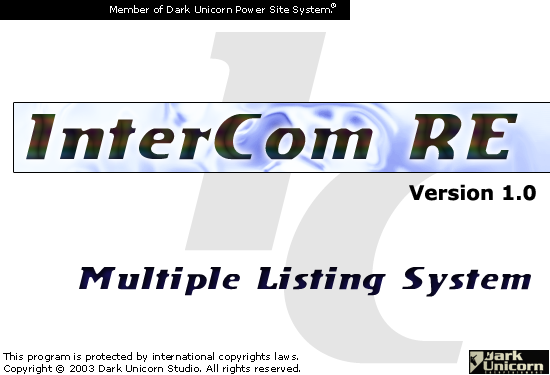
<style>
.page{position:relative;width:550px;height:375px;background:#ffffff}
.page>*{position:absolute;margin:0}
.t1{font:10px "Verdana";color:#ffffff}
.t2{font:5px "Verdana";color:#ffffff}
.t3{font:78px "DSMotionDemo-Italic"}
.t4{font:20px "Verdana-Bold";color:#000000}
.t5{font:38px "DSMotionDemo-Italic";color:#0a0826}
.t6{font:10px "Verdana";color:#000000}
</style>
<div class="page">
<p class="t1" style="left:110px;top:5px;width:222px;height:10px">Member of Dark Unicorn Power Site System.</p>
<p class="t2" style="left:331px;top:3px;width:5px;height:5px">®</p>
<p class="t3" style="left:26px;top:113px;width:492px;height:47px">InterCom RE</p>
<p class="t4" style="left:409px;top:184px;width:127px;height:17px">Version 1.0</p>
<p class="t5" style="left:79px;top:267px;width:452px;height:30px">Multiple Listing System</p>
<p class="t6" style="left:3px;top:352px;width:297px;height:22px">This program is protected by international copyrights laws.<br>Copyright © 2003 Dark Unicorn Studio. All rights reserved.</p>
</div>
